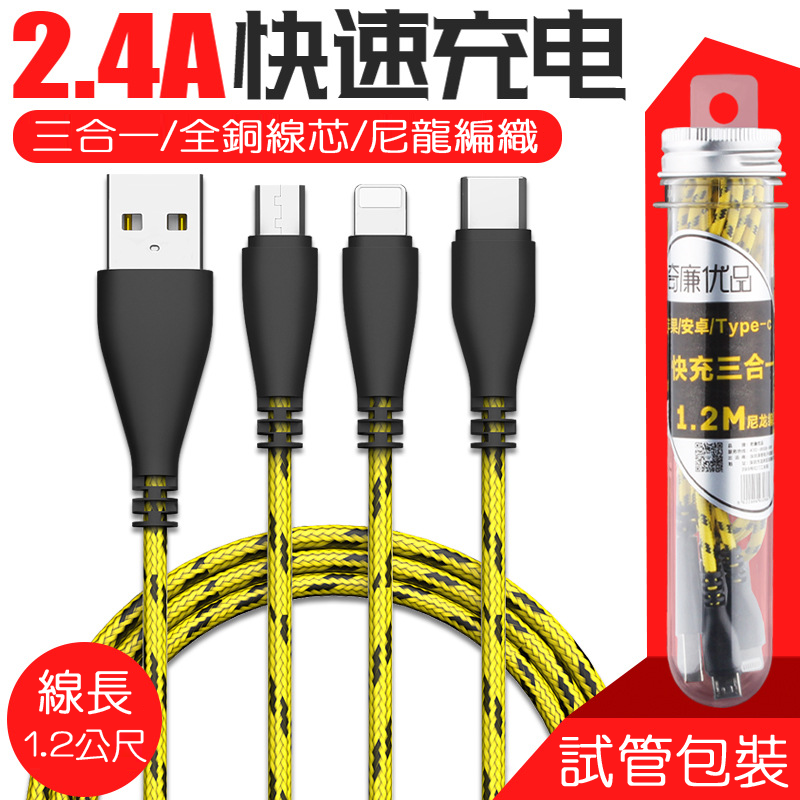
<style>
.page{position:relative;width:800px;height:800px;background:#ffffff}
.page>*{position:absolute;margin:0}
.t1{font:37px "HanWangYenLight";color:#ffffff;font-weight:bold;scale:1.13 1}
.t2{font:48px "HanWangYenLight";color:#ffffff;font-weight:bold}
.t3{font:36px "HanWangYenLight";color:#ffffff;font-weight:bold}
.t4{font:56.8px "HanWangYenLight";color:#ffffff;font-weight:bold}
</style>
<div class="page">
<p class="t1" style="left:33px;top:118px;width:505px;height:36px">三合一/全銅線芯/尼龍編織</p>
<p class="t2" style="left:38px;top:669px;width:94px;height:46px">線長</p>
<p class="t3" style="left:24px;top:729px;width:123px;height:34px">1.2公尺</p>
<p class="t4" style="left:559px;top:734px;width:230px;height:54px">試管包裝</p>
</div>
